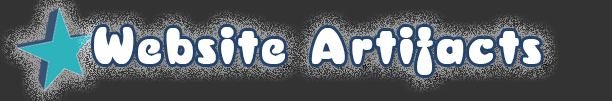
<style>
.page{position:relative;width:612px;height:101px;background:#333333}
.page>*{position:absolute;margin:0}
.t1{font:50px "Cressida";letter-spacing:0.06em;color:#ffffff;font-weight:bold;scale:1.12 1}
</style>
<div class="page">
<p class="t1" style="left:94px;top:27px;width:447px;height:48px">Website Artifacts</p>
</div>
